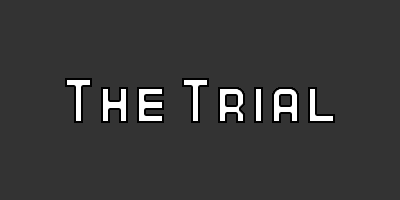
<style>
.page{position:relative;width:400px;height:200px;background:#333333}
.page>*{position:absolute;margin:0}
.t1{font:36px "Kenney-Bold"}
</style>
<div class="page">
<p class="t1" style="left:65px;top:78px;width:270px;height:45px">The Trial</p>
</div>
